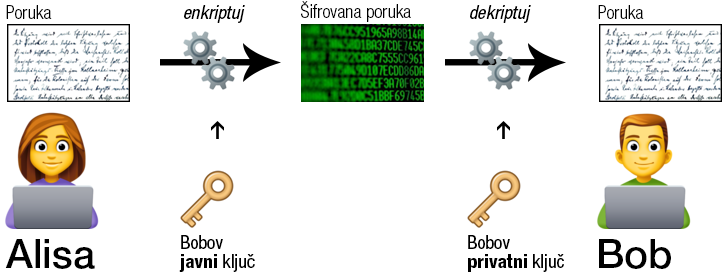
<style>
.page{position:relative;width:727px;height:274px;background:#ffffff}
.page>*{position:absolute;margin:0}
.t1{font:18.7px "HelveticaNeueLTStd-LtCn";color:#000000}
.t2{font:18.7px "HelveticaNeueLTStd-CnO";color:#000000}
.t3{font:40px "HelveticaNeueLTStd-Md";color:#000000}
.t4{font:18.7px/18.7px "HelveticaNeueLTStd-Cn";color:#000000}
.t5{font:18.7px/18.7px "HelveticaNeueLTStd-HvCn";color:#000000}
</style>
<div class="page">
<p class="t1" style="left:6px;top:5px;width:46px;height:14px">Poruka</p>
<p class="t2" style="left:184px;top:5px;width:61px;height:18px">enkriptuj</p>
<p class="t1" style="left:301px;top:1px;width:110px;height:21px">Šifrovana poruka</p>
<p class="t2" style="left:470px;top:5px;width:61px;height:18px">dekriptuj</p>
<p class="t1" style="left:598px;top:5px;width:46px;height:14px">Poruka</p>
<p class="t3" style="left:5px;top:239px;width:90px;height:30px">Alisa</p>
<p class="t4" style="left:179px;top:235px;width:76px;height:37px">Bobov<br><span class="t5">javni</span> kljuc</p>
<p class="t5" style="left:468px;top:235px;width:96px;height:37px"><span class="t4">Bobov<br></span>privatni<span class="t4"> kljuc</span></p>
<p class="t3" style="left:599px;top:239px;width:72px;height:30px">Bob</p>
</div>
